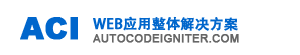
<style>
.page{position:relative;width:300px;height:55px;background:#ffffff}
.page>*{position:absolute;margin:0}
.t1{font:30px "Arial-Black";color:#0066cc;text-transform:uppercase;font-weight:bold}
.t2{font:11px "ArialMT";letter-spacing:0.025em;color:#666666;text-transform:uppercase;font-weight:bold}
</style>
<div class="page">
<p class="t1" style="left:20px;top:17px;width:58px;height:23px">aci</p>
<p class="t2" style="left:93px;top:34px;width:146px;height:9px">AUTOCODEIGNITER.COM</p>
</div>
